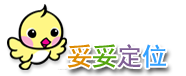
<style>
.page{position:relative;width:186px;height:76px;background:#ffffff}
.page>*{position:absolute;margin:0}
.t1{font:25px "SimHei";color:#de8a00}
.t2{font:25px "SimHei";color:#55a50e}
.t3{font:25px "SimHei";color:#805f95}
.t4{font:25px "SimHei";color:#33a1ff}
</style>
<div class="page">
<p class="t1" style="left:67px;top:44px;width:99px;height:24px">妥<span class="t2">妥</span><span class="t3">定</span><span class="t4">位</span></p>
</div>
